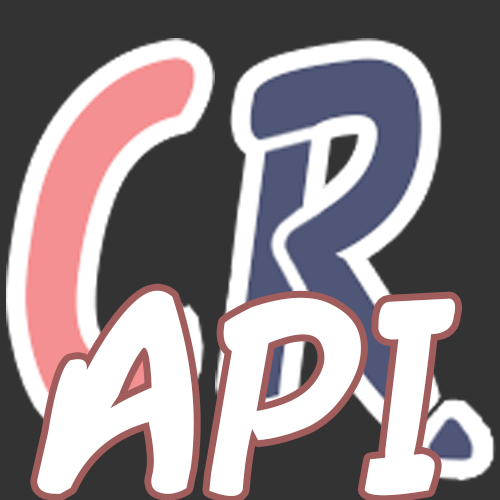
<style>
.page{position:relative;width:500px;height:500px;background:#333333}
.page>*{position:absolute;margin:0}
.t1{font:291.9px "FawnScript";color:#ffffff;scale:1.28 1}
</style>
<div class="page">
<p class="t1" style="left:37px;top:290px;width:419px;height:206px">API</p>
</div>
